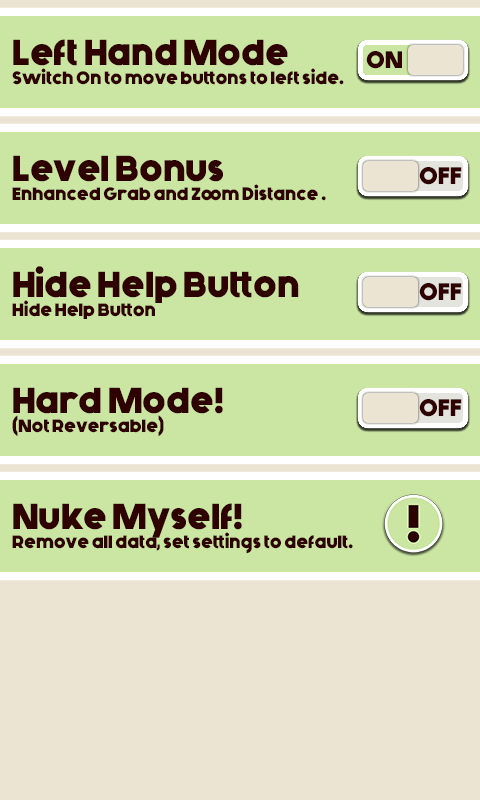
<style>
.page{position:relative;width:480px;height:800px;background:#cbe6a3}
.page>*{position:absolute;margin:0}
.t1{font:36px "Generica-Bold";color:#2f0000}
.t2{font:18px "Generica-Bold";color:#2f0000}
</style>
<div class="page">
<p class="t1" style="left:13px;top:39px;width:275px;height:27px">Left Hand Mode</p>
<p class="t2" style="left:12px;top:68px;width:332px;height:17px">Switch On to move buttons to left side.</p>
<p class="t1" style="left:13px;top:155px;width:210px;height:27px">Level Bonus</p>
<p class="t2" style="left:12px;top:184px;width:314px;height:17px">Enhanced Grab and Zoom Distance .</p>
<p class="t1" style="left:13px;top:266px;width:286px;height:37px">Hide Help Button</p>
<p class="t2" style="left:12px;top:300px;width:143px;height:19px">Hide Help Button</p>
<p class="t1" style="left:13px;top:387px;width:210px;height:27px">Hard Mode!</p>
<p class="t2" style="left:12px;top:415px;width:152px;height:22px">(Not Reversable)</p>
<p class="t1" style="left:13px;top:503px;width:229px;height:35px">Nuke Myself!</p>
<p class="t2" style="left:12px;top:532px;width:341px;height:22px">Remove all data, set settings to default.</p>
</div>
